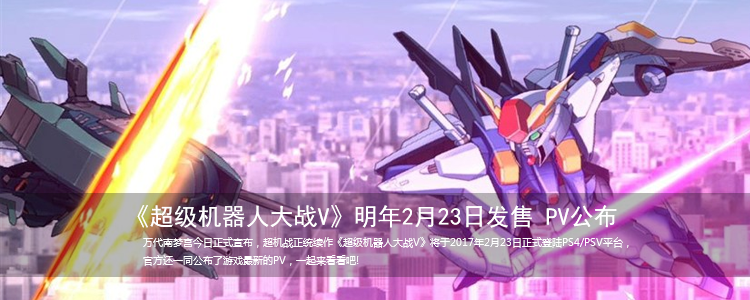
<style>
.page{position:relative;width:750px;height:300px}
.page>*{position:absolute;margin:0}
.t1{font:24px "SimHei";color:#ffffff}
.t2{font:10px "MicrosoftYaHei";color:#ffffff}
</style>
<div class="page">
<p class="t1" style="left:137px;top:205px;width:480px;height:23px">《超级机器人大战V》明年2月23日发售 PV公布</p>
<p class="t2" style="left:143px;top:237px;width:486px;height:29px">万代南梦宫今日正式宣布，超机战正统续作《超级机器人大战V》将于2017年2月23日正式登陆PS4/PSV平台，<br>官方还一同公布了游戏最新的PV，一起来看看吧!</p>
</div>
